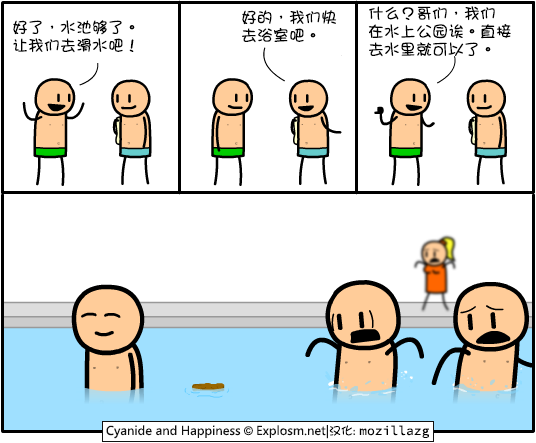
<style>
.page{position:relative;width:536px;height:443px;background:#ffffff}
.page>*{position:absolute;margin:0}
.t1{font:16px/18px "DFGirl";color:#000000}
</style>
<div class="page">
<p class="t1" style="left:368px;top:6px;width:143px;height:51px">什么？哥们，我们<br>在水上公园诶。直接<br>去水里就可以了。</p>
<p class="t1" style="left:242px;top:10px;width:95px;height:33px">好的，我们快<br>去浴室吧。</p>
<p class="t1" style="left:13px;top:20px;width:122px;height:33px">好了，水池够了。<br>让我们去滑水吧！</p>
</div>
